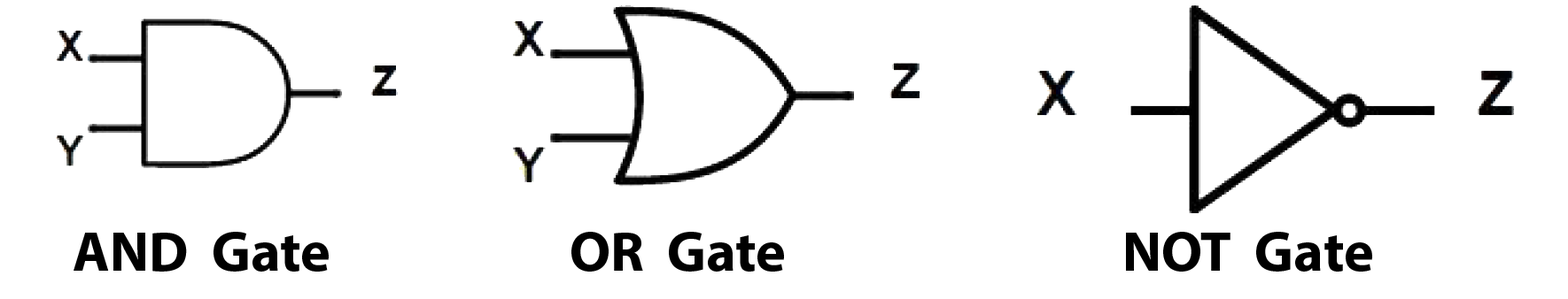
<style>
.page{position:relative;width:1568px;height:299px;background:#ffffff}
.page>*{position:absolute;margin:0}
.t1{font:56.7px "MyriadPro-Bold";color:#000000}
</style>
<div class="page">
<p class="t1" style="left:74px;top:232px;width:255px;height:40px">AND  Gate</p>
<p class="t1" style="left:571px;top:232px;width:213px;height:40px">OR  Gate</p>
<p class="t1" style="left:1126px;top:232px;width:246px;height:40px">NOT  Gate</p>
</div>
